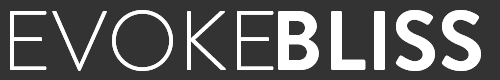
<style>
.page{position:relative;width:500px;height:80px;background:#333333}
.page>*{position:absolute;margin:0}
.t1{font:85px "BrandonGrotesque-Bold";color:#ffffff;text-transform:uppercase}
.t2{font:85px "BrandonGrotesque-Light";color:#ffffff;text-transform:uppercase}
.t3{font:85px "BrandonGrotesque-Light";letter-spacing:-0.1em;color:#ffffff;text-transform:uppercase}
</style>
<div class="page">
<p class="t1" style="left:10px;top:10px;width:471px;height:61px"><span class="t2">Evok</span><span class="t3">e</span>bliss</p>
</div>
